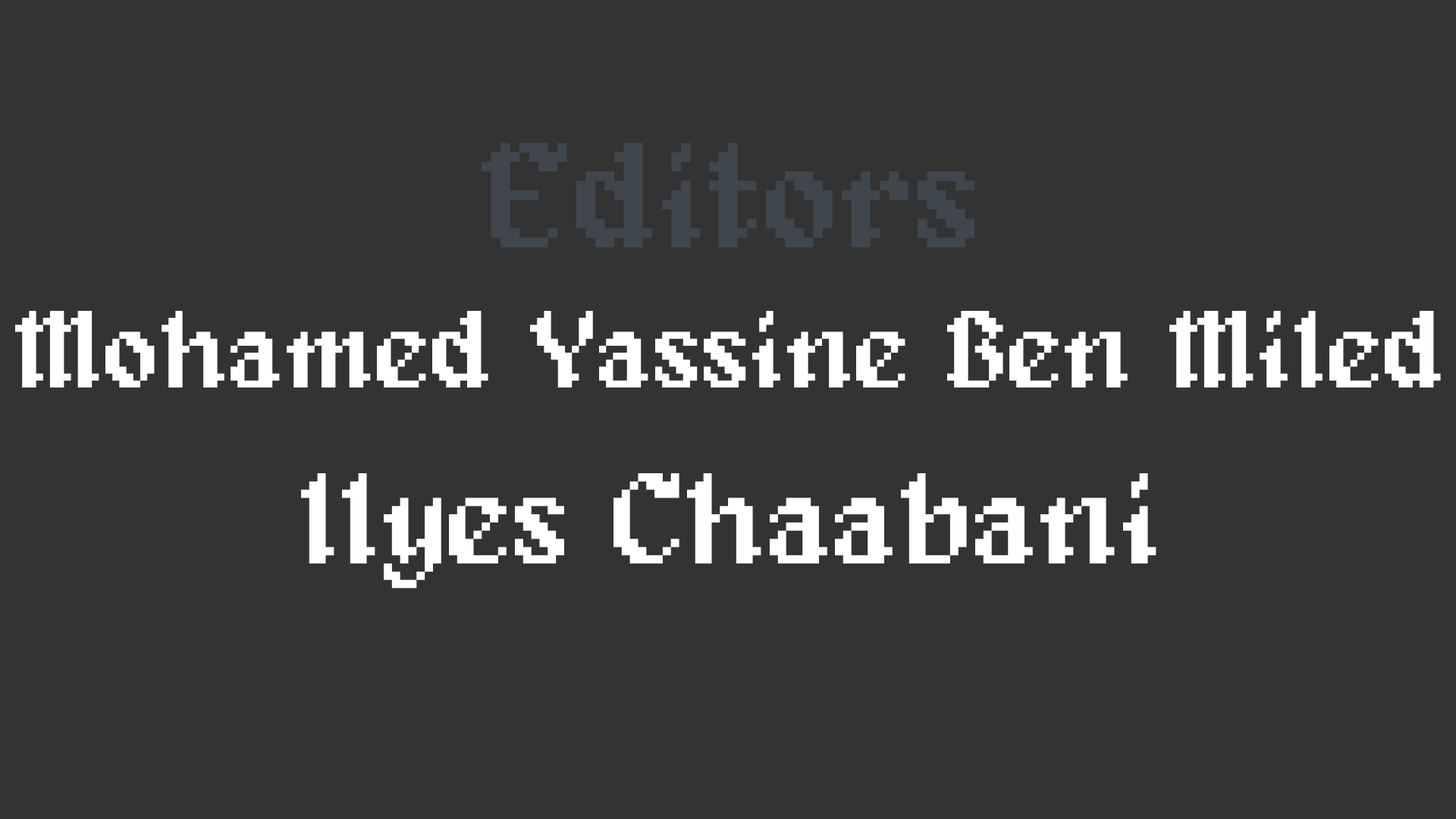
<style>
.page{position:relative;width:1456px;height:819px;background:#333333}
.page>*{position:absolute;margin:0}
.t1{font:151.7px "Alagard";color:#40464d}
.t2{font:111.2px "Alagard";color:#ffffff}
.t3{font:131.4px "Alagard";color:#ffffff}
</style>
<div class="page">
<p class="t1" style="left:482px;top:143px;width:492px;height:104px">Editors</p>
<p class="t2" style="left:15px;top:310px;width:1426px;height:78px">Mohamed Yassine Ben Miled</p>
<p class="t3" style="left:301px;top:473px;width:855px;height:115px">Ilyes Chaabani</p>
</div>
